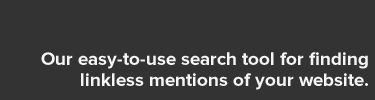
<style>
.page{position:relative;width:375px;height:100px;background:#333333}
.page>*{position:absolute;margin:0}
.t1{font:18.7px/21.3px "ProximaNova-Bold";color:#f5f5f5}
</style>
<div class="page">
<p class="t1" style="left:41px;top:52px;width:327px;height:38px;text-align:right">Our easy-to-use search tool for finding<br>linkless mentions of your website.</p>
</div>
